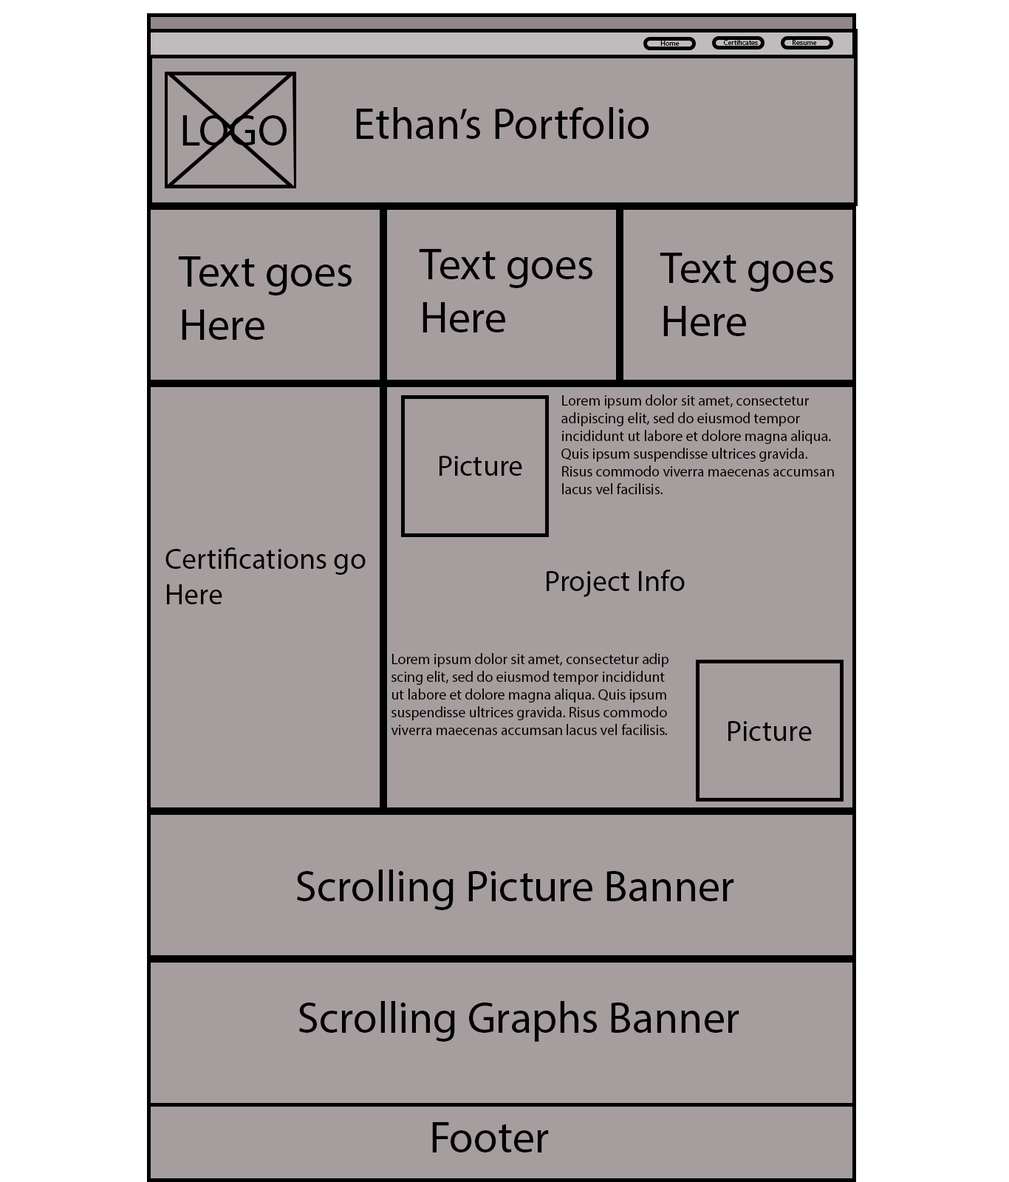
<style>
.page{position:relative;width:1009px;height:1182px;background:#a69e9e}
.page>*{position:absolute;margin:0}
.t1{font:7.4px "MyriadPro-Regular";color:#000000}
.t2{font:44.3px "MyriadPro-Regular";color:#000000}
.t3{font:14.8px "MyriadPro-Regular";color:#000000}
.t4{font:29.5px "MyriadPro-Regular";color:#000000}
</style>
<div class="page">
<p class="t1" style="left:660px;top:41px;width:20px;height:5px">Home</p>
<p class="t1" style="left:723px;top:39px;width:35px;height:6px">Certificates</p>
<p class="t1" style="left:793px;top:40px;width:24px;height:5px">Resume</p>
<p class="t2" style="left:356px;top:107px;width:293px;height:32px">Ethan’s Portfolio</p>
<p class="t2" style="left:182px;top:115px;width:105px;height:31px">LOGO</p>
<p class="t2" style="left:178px;top:256px;width:174px;height:84px">Text goes Here</p>
<p class="t2" style="left:419px;top:249px;width:173px;height:83px">Text goes Here</p>
<p class="t2" style="left:660px;top:253px;width:173px;height:83px">Text goes Here</p>
<p class="t3" style="left:561px;top:394px;width:273px;height:100px">Lorem ipsum dolor sit amet, consectetur adipiscing elit, sed do eiusmod tempor incididunt ut labore et dolore magna aliqua. Quis ipsum suspendisse ultrices gravida. Risus commodo viverra maecenas accumsan lacus vel facilisis.</p>
<p class="t4" style="left:439px;top:456px;width:83px;height:20px">Picture</p>
<p class="t4" style="left:165px;top:547px;width:201px;height:57px">Certifications go Here</p>
<p class="t4" style="left:547px;top:569px;width:138px;height:28px">Project Info</p>
<p class="t3" style="left:391px;top:653px;width:277px;height:82px">Lorem ipsum dolor sit amet, consectetur adip<br>scing elit, sed do eiusmod tempor incididunt <br>ut labore et dolore magna aliqua. Quis ipsum <br>suspendisse ultrices gravida. Risus commodo <br>viverra maecenas accumsan lacus vel facilisis.</p>
<p class="t4" style="left:728px;top:721px;width:84px;height:20px">Picture</p>
<p class="t2" style="left:297px;top:869px;width:437px;height:41px">Scrolling Picture Banner</p>
<p class="t2" style="left:299px;top:1001px;width:440px;height:40px">Scrolling Graphs Banner</p>
<p class="t2" style="left:432px;top:1122px;width:117px;height:30px">Footer</p>
</div>
